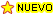
<style>
.page{position:relative;width:53px;height:14px;background:#ffff00}
.page>*{position:absolute;margin:0}
.t1{font:10.4px "ArialMT";color:#000000}
</style>
<div class="page">
<p class="t1" style="left:18px;top:4px;width:34px;height:7px">NUEVO</p>
</div>
